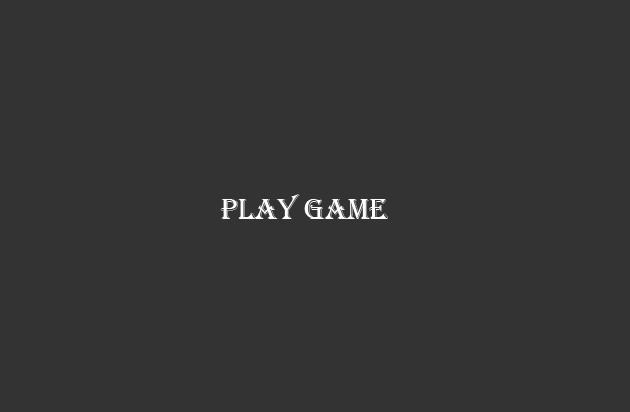
<style>
.page{position:relative;width:630px;height:412px;background:#333333}
.page>*{position:absolute;margin:0}
.t1{font:30px "Algerian";color:#ffffff}
</style>
<div class="page">
<p class="t1" style="left:220px;top:194px;width:168px;height:25px">Play game</p>
</div>
